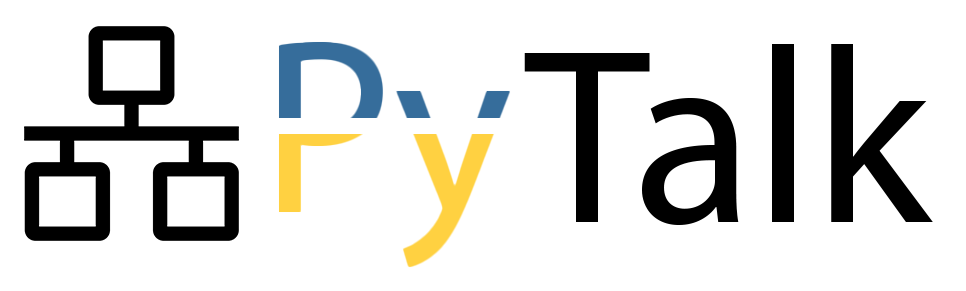
<style>
.page{position:relative;width:966px;height:291px;background:#ffffff}
.page>*{position:absolute;margin:0}
.t1{font:250px "MyriadPro-Regular";color:#000000}
</style>
<div class="page">
<p class="t1" style="left:524px;top:44px;width:409px;height:181px">Talk</p>
</div>
